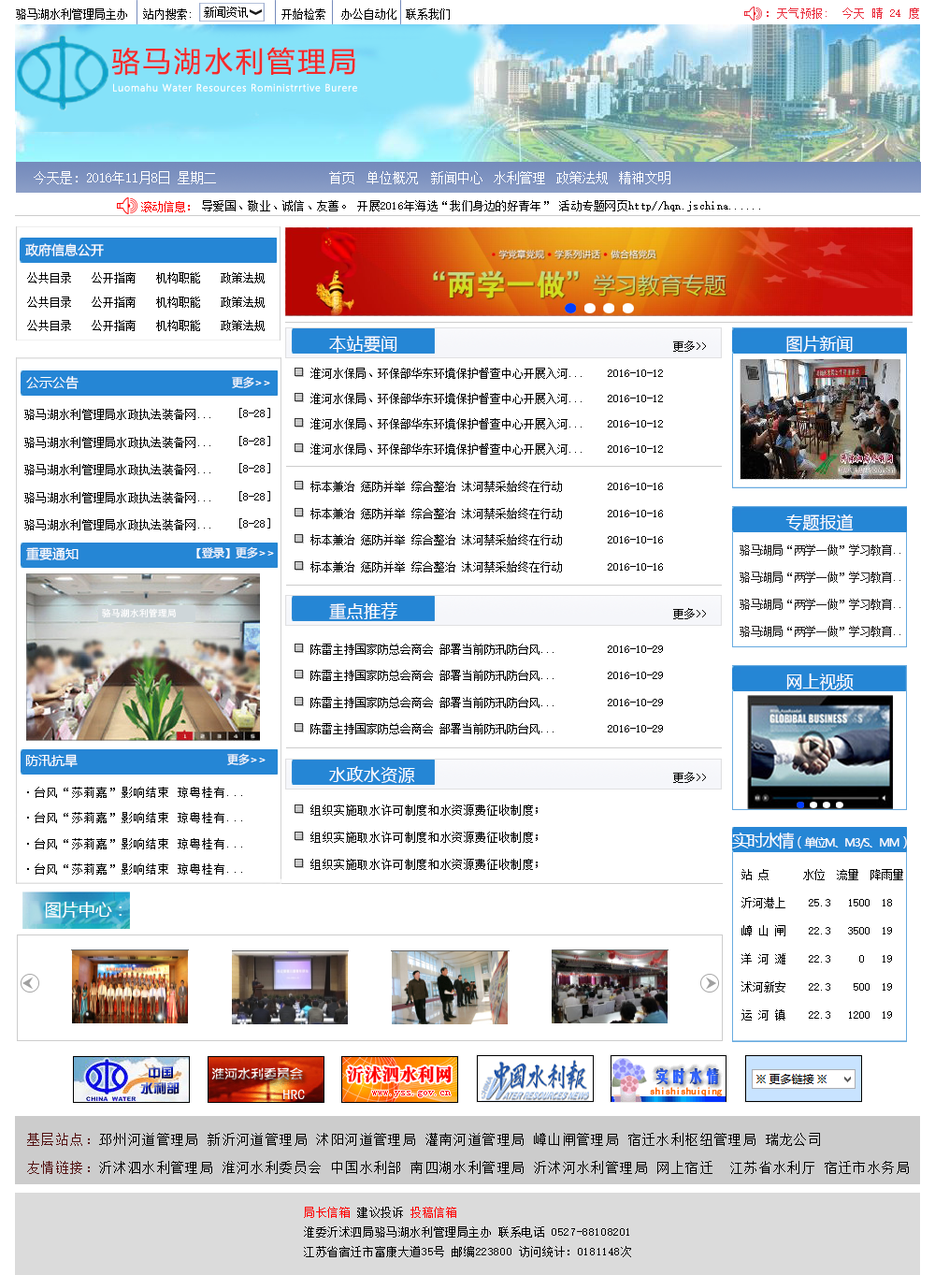
<style>
.page{position:relative;width:935px;height:1275px;background:#ffffff}
.page>*{position:absolute;margin:0}
.t1{font:11.2px "SimSun";color:#000000}
.t2{font:11.2px "SimSun";color:#010101}
.t3{font:11.2px "SimSun";letter-spacing:0.05em;color:#e92b3a}
.t4{font:28.1px "MicrosoftYaHei";letter-spacing:0.1em;color:#f12020}
.t5{font:9.4px "MicrosoftYaHeiLight";letter-spacing:0.07em;color:#ffffff;font-weight:bold}
.t6{font:13.1px "SimSun";color:#ffffff}
.t7{font:11.2px "SimSun";color:#ff0000}
.t8{font:11.2px "SimSun";letter-spacing:0.025em;color:#010101}
.t9{font:13px "MicrosoftYaHei";color:#ffffff}
.t10{font:16.8px "MicrosoftYaHei";letter-spacing:0.025em;color:#ffffff}
.t11{font:16.8px "MicrosoftYaHei";color:#ffffff}
.t12{font:13.1px "MicrosoftYaHei";color:#ffffff}
.t13{font:11.2px "MicrosoftYaHei";color:#ffffff}
.t14{font:11.2px "SimSun";letter-spacing:0.01em;color:#040404}
.t15{font:11.2px "SimSun";letter-spacing:0.025em;color:#000000}
.t16{font:11.2px "SimSun";letter-spacing:0.01em;color:#000000}
.t17{font:11.2px "SimSun";letter-spacing:-0.025em;color:#1e1c1c}
.t18{font:9.4px "SimSun";color:#ffffff}
.t19{font:11.2px "SimSun";letter-spacing:0.1em;color:#000000}
.t20{font:11.2px "SimSun";letter-spacing:0.05em;color:#000000}
.t21{font:11.2px "MicrosoftYaHei";letter-spacing:-0.1em;color:#ffffff}
.t22{font:16.8px "MicrosoftYaHei";letter-spacing:-0.1em;color:#ffffff}
.t23{font:13.1px "MicrosoftYaHei";letter-spacing:-0.1em;color:#ffffff}
.t24{font:11.2px/28.1px "SimSun";color:#000000}
.t25{font:13.1px/28.1px "SimSun";letter-spacing:0.1em;color:#000000}
.t26{font:13.1px/28.1px "SimSun";letter-spacing:0.1em;color:#531111}
.t27{font:11.2px "SimSun";letter-spacing:0.05em;color:#ff0000}
.t28{font:11.2px/28.1px "SimSun";letter-spacing:-0.1em;color:#000000}
</style>
<div class="page">
<p class="t1" style="left:16px;top:8px;width:111px;height:12px">骆马湖水利管理局主办</p>
<p class="t1" style="left:143px;top:8px;width:48px;height:12px">站内搜索:</p>
<p class="t1" style="left:204px;top:7px;width:44px;height:11px">新闻资讯</p>
<p class="t2" style="left:282px;top:8px;width:43px;height:12px">开始检索</p>
<p class="t1" style="left:341px;top:8px;width:56px;height:12px">办公自动化</p>
<p class="t1" style="left:406px;top:8px;width:44px;height:12px">联系我们</p>
<p class="t3" style="left:767px;top:7px;width:152px;height:12px">：天气预报:  今天 晴 24 度</p>
<p class="t4" style="left:111px;top:47px;width:244px;height:29px">骆马湖水利管理局</p>
<p class="t5" style="left:113px;top:83px;width:244px;height:9px">Luomahu Water Resources Roministrrtive Burere</p>
<p class="t6" style="left:34px;top:171px;width:182px;height:13px">今天是: 2016年11月8日 星期二</p>
<p class="t6" style="left:329px;top:171px;width:25px;height:13px">首页</p>
<p class="t6" style="left:367px;top:171px;width:51px;height:13px">单位概况</p>
<p class="t6" style="left:431px;top:171px;width:52px;height:13px">新闻中心</p>
<p class="t6" style="left:494px;top:171px;width:51px;height:13px">水利管理</p>
<p class="t6" style="left:557px;top:171px;width:51px;height:13px">政策法规</p>
<p class="t6" style="left:619px;top:171px;width:52px;height:13px">精神文明</p>
<p class="t7" style="left:141px;top:201px;width:49px;height:11px">滚动信息：</p>
<p class="t8" style="left:202px;top:200px;width:558px;height:11px">导爱国、敬业、诚信、友善。 开展2016年海选“我们身边的好青年” 活动专题网页http//hqn.jschina......</p>
<p class="t9" style="left:25px;top:243px;width:79px;height:13px">政府信息公开</p>
<p class="t1" style="left:27px;top:272px;width:44px;height:11px">公共目录</p>
<p class="t1" style="left:92px;top:272px;width:44px;height:11px">公开指南</p>
<p class="t1" style="left:156px;top:272px;width:44px;height:11px">机构职能</p>
<p class="t1" style="left:221px;top:272px;width:44px;height:11px">政策法规</p>
<p class="t1" style="left:27px;top:297px;width:44px;height:11px">公共目录</p>
<p class="t1" style="left:92px;top:297px;width:44px;height:11px">公开指南</p>
<p class="t1" style="left:156px;top:297px;width:44px;height:11px">机构职能</p>
<p class="t1" style="left:221px;top:297px;width:44px;height:11px">政策法规</p>
<p class="t1" style="left:27px;top:320px;width:44px;height:11px">公共目录</p>
<p class="t1" style="left:92px;top:320px;width:44px;height:11px">公开指南</p>
<p class="t1" style="left:156px;top:320px;width:44px;height:11px">机构职能</p>
<p class="t1" style="left:221px;top:320px;width:44px;height:11px">政策法规</p>
<p class="t10" style="left:329px;top:336px;width:69px;height:17px">本站要闻</p>
<p class="t1" style="left:673px;top:340px;width:33px;height:12px">更多&gt;&gt;</p>
<p class="t11" style="left:787px;top:336px;width:66px;height:17px">图片新闻</p>
<p class="t12" style="left:26px;top:376px;width:53px;height:13px">公示公告</p>
<p class="t13" style="left:232px;top:376px;width:38px;height:12px">更多&gt;&gt;</p>
<p class="t1" style="left:311px;top:368px;width:352px;height:11px">淮河水保局、环保部华东环境保护督查中心开展入河...    2016-10-12</p>
<p class="t1" style="left:311px;top:393px;width:352px;height:11px">淮河水保局、环保部华东环境保护督查中心开展入河...    2016-10-12</p>
<p class="t8" style="left:24px;top:409px;width:186px;height:11px">骆马湖水利管理局水政执法装备网...</p>
<p class="t14" style="left:239px;top:408px;width:31px;height:10px">[8-28]</p>
<p class="t1" style="left:311px;top:418px;width:352px;height:11px">淮河水保局、环保部华东环境保护督查中心开展入河...    2016-10-12</p>
<p class="t15" style="left:24px;top:437px;width:186px;height:11px">骆马湖水利管理局水政执法装备网...</p>
<p class="t16" style="left:239px;top:436px;width:31px;height:10px">[8-28]</p>
<p class="t1" style="left:311px;top:443px;width:352px;height:12px">淮河水保局、环保部华东环境保护督查中心开展入河...    2016-10-12</p>
<p class="t15" style="left:24px;top:464px;width:186px;height:11px">骆马湖水利管理局水政执法装备网...</p>
<p class="t14" style="left:239px;top:463px;width:31px;height:10px">[8-28]</p>
<p class="t1" style="left:311px;top:481px;width:352px;height:11px">标本兼治 惩防并举 综合整治 沐河禁采始终在行动        2016-10-16</p>
<p class="t15" style="left:24px;top:492px;width:186px;height:11px">骆马湖水利管理局水政执法装备网...</p>
<p class="t14" style="left:239px;top:491px;width:31px;height:10px">[8-28]</p>
<p class="t1" style="left:311px;top:508px;width:352px;height:11px">标本兼治 惩防并举 综合整治 沐河禁采始终在行动        2016-10-16</p>
<p class="t15" style="left:24px;top:519px;width:186px;height:11px">骆马湖水利管理局水政执法装备网...</p>
<p class="t14" style="left:239px;top:518px;width:31px;height:10px">[8-28]</p>
<p class="t11" style="left:786px;top:514px;width:68px;height:17px">专题报道</p>
<p class="t1" style="left:311px;top:534px;width:352px;height:11px">标本兼治 惩防并举 综合整治 沐河禁采始终在行动        2016-10-16</p>
<p class="t17" style="left:740px;top:544px;width:161px;height:12px">骆马湖局“两学一做”学习教育..</p>
<p class="t12" style="left:26px;top:547px;width:53px;height:13px">重要通知</p>
<p class="t13" style="left:196px;top:546px;width:78px;height:12px">【登录】更多&gt;&gt;</p>
<p class="t1" style="left:311px;top:561px;width:352px;height:11px">标本兼治 惩防并举 综合整治 沐河禁采始终在行动        2016-10-16</p>
<p class="t17" style="left:740px;top:571px;width:161px;height:12px">骆马湖局“两学一做”学习教育..</p>
<p class="t10" style="left:329px;top:602px;width:69px;height:17px">重点推荐</p>
<p class="t17" style="left:740px;top:599px;width:161px;height:11px">骆马湖局“两学一做”学习教育..</p>
<p class="t18" style="left:102px;top:608px;width:74px;height:10px">骆马湖水利管理局</p>
<p class="t1" style="left:673px;top:608px;width:33px;height:11px">更多&gt;&gt;</p>
<p class="t17" style="left:740px;top:626px;width:161px;height:11px">骆马湖局“两学一做”学习教育..</p>
<p class="t1" style="left:311px;top:644px;width:352px;height:11px">陈雷主持国家防总会商会 部署当前防汛防台风...         2016-10-29</p>
<p class="t1" style="left:311px;top:670px;width:352px;height:11px">陈雷主持国家防总会商会 部署当前防汛防台风...         2016-10-29</p>
<p class="t11" style="left:787px;top:673px;width:67px;height:17px">网上视频</p>
<p class="t1" style="left:311px;top:697px;width:352px;height:11px">陈雷主持国家防总会商会 部署当前防汛防台风...         2016-10-29</p>
<p class="t1" style="left:311px;top:723px;width:352px;height:11px">陈雷主持国家防总会商会 部署当前防汛防台风...         2016-10-29</p>
<p class="t12" style="left:25px;top:754px;width:53px;height:13px">防汛抗旱</p>
<p class="t13" style="left:227px;top:753px;width:39px;height:12px">更多&gt;&gt;</p>
<p class="t10" style="left:329px;top:766px;width:86px;height:17px">水政水资源</p>
<p class="t1" style="left:673px;top:772px;width:33px;height:11px">更多&gt;&gt;</p>
<p class="t19" style="left:27px;top:787px;width:215px;height:11px">·台风“莎莉嘉”影响结束 琼粤桂有...</p>
<p class="t20" style="left:311px;top:804px;width:227px;height:12px">组织实施取水许可制度和水资源费征收制度；</p>
<p class="t19" style="left:27px;top:812px;width:215px;height:11px">·台风“莎莉嘉”影响结束 琼粤桂有...</p>
<p class="t20" style="left:311px;top:832px;width:227px;height:11px">组织实施取水许可制度和水资源费征收制度；</p>
<p class="t21" style="left:732px;top:832px;width:175px;height:17px"><span class="t22">实时水情</span><span class="t23">（</span>单位M、M3/S、MM<span class="t23">）</span></p>
<p class="t19" style="left:27px;top:838px;width:215px;height:11px">·台风“莎莉嘉”影响结束 琼粤桂有...</p>
<p class="t19" style="left:27px;top:863px;width:215px;height:12px">·台风“莎莉嘉”影响结束 琼粤桂有...</p>
<p class="t20" style="left:311px;top:859px;width:227px;height:11px">组织实施取水许可制度和水资源费征收制度；</p>
<p class="t24" style="left:742px;top:869px;width:162px;height:151px">站 点      水位  流量  降雨量 <br>沂河港上    25.3   1500  18<br>嶂 山 闸    22.3   3500  19<br>洋 河 滩    22.3     0   19<br>沭河新安    22.3    500  19<br>运 河 镇    22.3   1200  19</p>
<p class="t11" style="left:45px;top:902px;width:77px;height:17px">图片中心：</p>
<p class="t25" style="left:27px;top:1133px;width:882px;height:41px"><span class="t26">基层站点：</span>邳州河道管理局 新沂河道管理局 沭阳河道管理局 灌南河道管理局 嶂山闸管理局 宿迁水利枢纽管理局 瑞龙公司<br><span class="t26">友情链接：</span>沂沭泗水利管理局 淮河水利委员会 中国水利部 南四湖水利管理局 沂沭河水利管理局 网上宿迁  江苏省水利厅 宿迁市水务局</p>
<p class="t20" style="left:304px;top:1207px;width:327px;height:50px"><span class="t27">局长信箱</span> 建议投诉 <span class="t27">投稿信箱<br></span>淮委沂沭泗局骆马湖水利管理局主办 联系电话 0527-88108201<br>江苏省宿迁市富康大道35号 邮编223800 访问统计：0181148<span class="t28">次</span></p>
</div>
